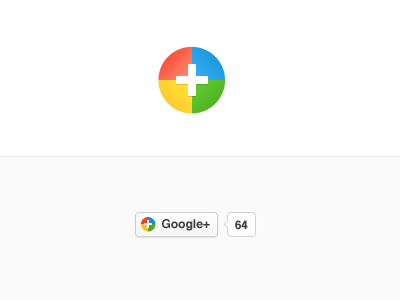
<style>
.page{position:relative;width:400px;height:300px;background:#ffffff}
.page>*{position:absolute;margin:0}
.t1{font:60px "Helvetica-Bold";color:#ffffff}
.t2{font:14px "Helvetica-Bold";color:#ffffff}
.t3{font:12px "Helvetica-Bold";color:#414040}
</style>
<div class="page">
<p class="t1" style="left:176px;top:64px;width:32px;height:32px">+</p>
<p class="t2" style="left:144px;top:220px;width:8px;height:8px">+</p>
<p class="t3" style="left:162px;top:219px;width:48px;height:12px">Google+</p>
<p class="t3" style="left:235px;top:220px;width:13px;height:10px">64</p>
</div>
